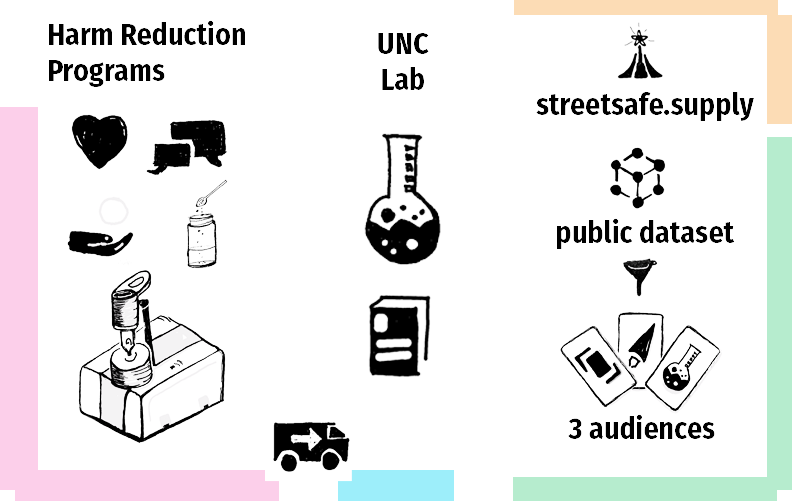
<style>
.page{position:relative;width:792px;height:501px;background:#ffffff}
.page>*{position:absolute;margin:0}
.t1{font:30px "FiraSansCondensed-Bold";color:#000000}
</style>
<div class="page">
<p class="t1" style="left:49px;top:20px;width:196px;height:67px">Harm Reduction<br>Programs</p>
<p class="t1" style="left:378px;top:33px;width:51px;height:57px;text-align:center">UNC<br>Lab</p>
<p class="t1" style="left:536px;top:92px;width:218px;height:29px">streetsafe.supply</p>
<p class="t1" style="left:557px;top:218px;width:178px;height:31px">public dataset</p>
<p class="t1" style="left:568px;top:414px;width:147px;height:25px">3 audiences</p>
</div>
